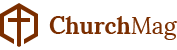
<style>
.page{position:relative;width:177px;height:50px;background:#ffffff}
.page>*{position:absolute;margin:0}
.t1{font:23px "Lora-Bold";color:#7b2e00}
.t2{font:24px "Lora-Bold";color:#7b2e00}
.t3{font:23px "Lora-Regular";color:#7b2e00}
</style>
<div class="page">
<p class="t1" style="left:49px;top:16px;width:128px;height:24px"><span class="t2">C</span>hurch<span class="t3">Mag</span></p>
</div>
